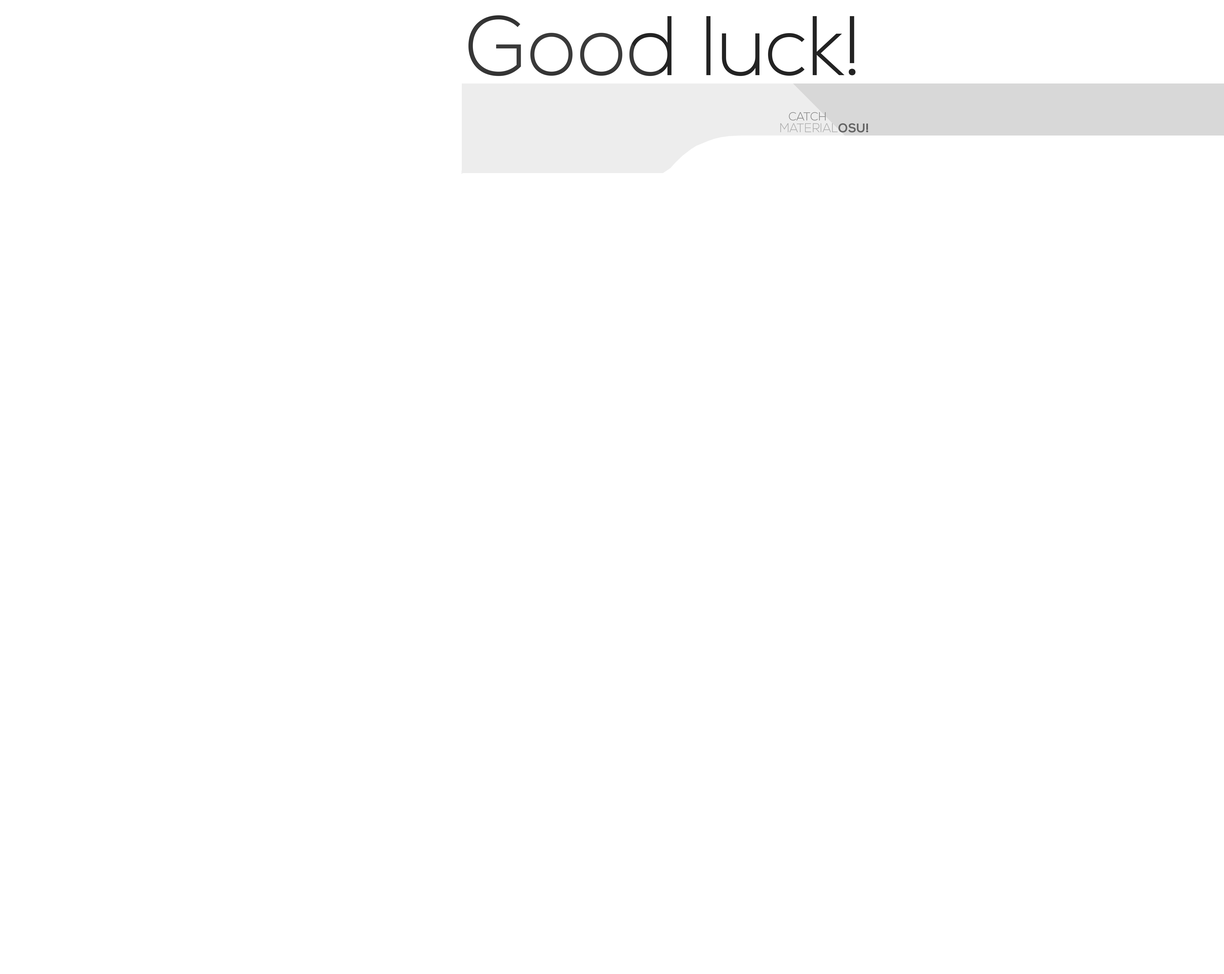
<style>
.page{position:relative;width:1224px;height:974px;background:#ffffff}
.page>*{position:absolute;margin:0}
.t1{font:84px "NexaLight";color:#3a3a3a}
.t2{font:11.6px "NexaLight";color:#868686}
.t3{font:12.3px "NexaLight";color:#adadad}
.t4{font:12.3px "NexaBold";color:#5e5e5e}
.t5{font:12.3px "NexaBold";color:#656565}
</style>
<div class="page">
<p class="t1" style="left:469px;top:15px;width:387px;height:61px">!Good luck</p>
<p class="t2" style="left:789px;top:112px;width:37px;height:8px">CATCH</p>
<p class="t3" style="left:781px;top:123px;width:87px;height:9px"><span class="t4">!</span>MATERIAL<span class="t5">OSU</span></p>
</div>
